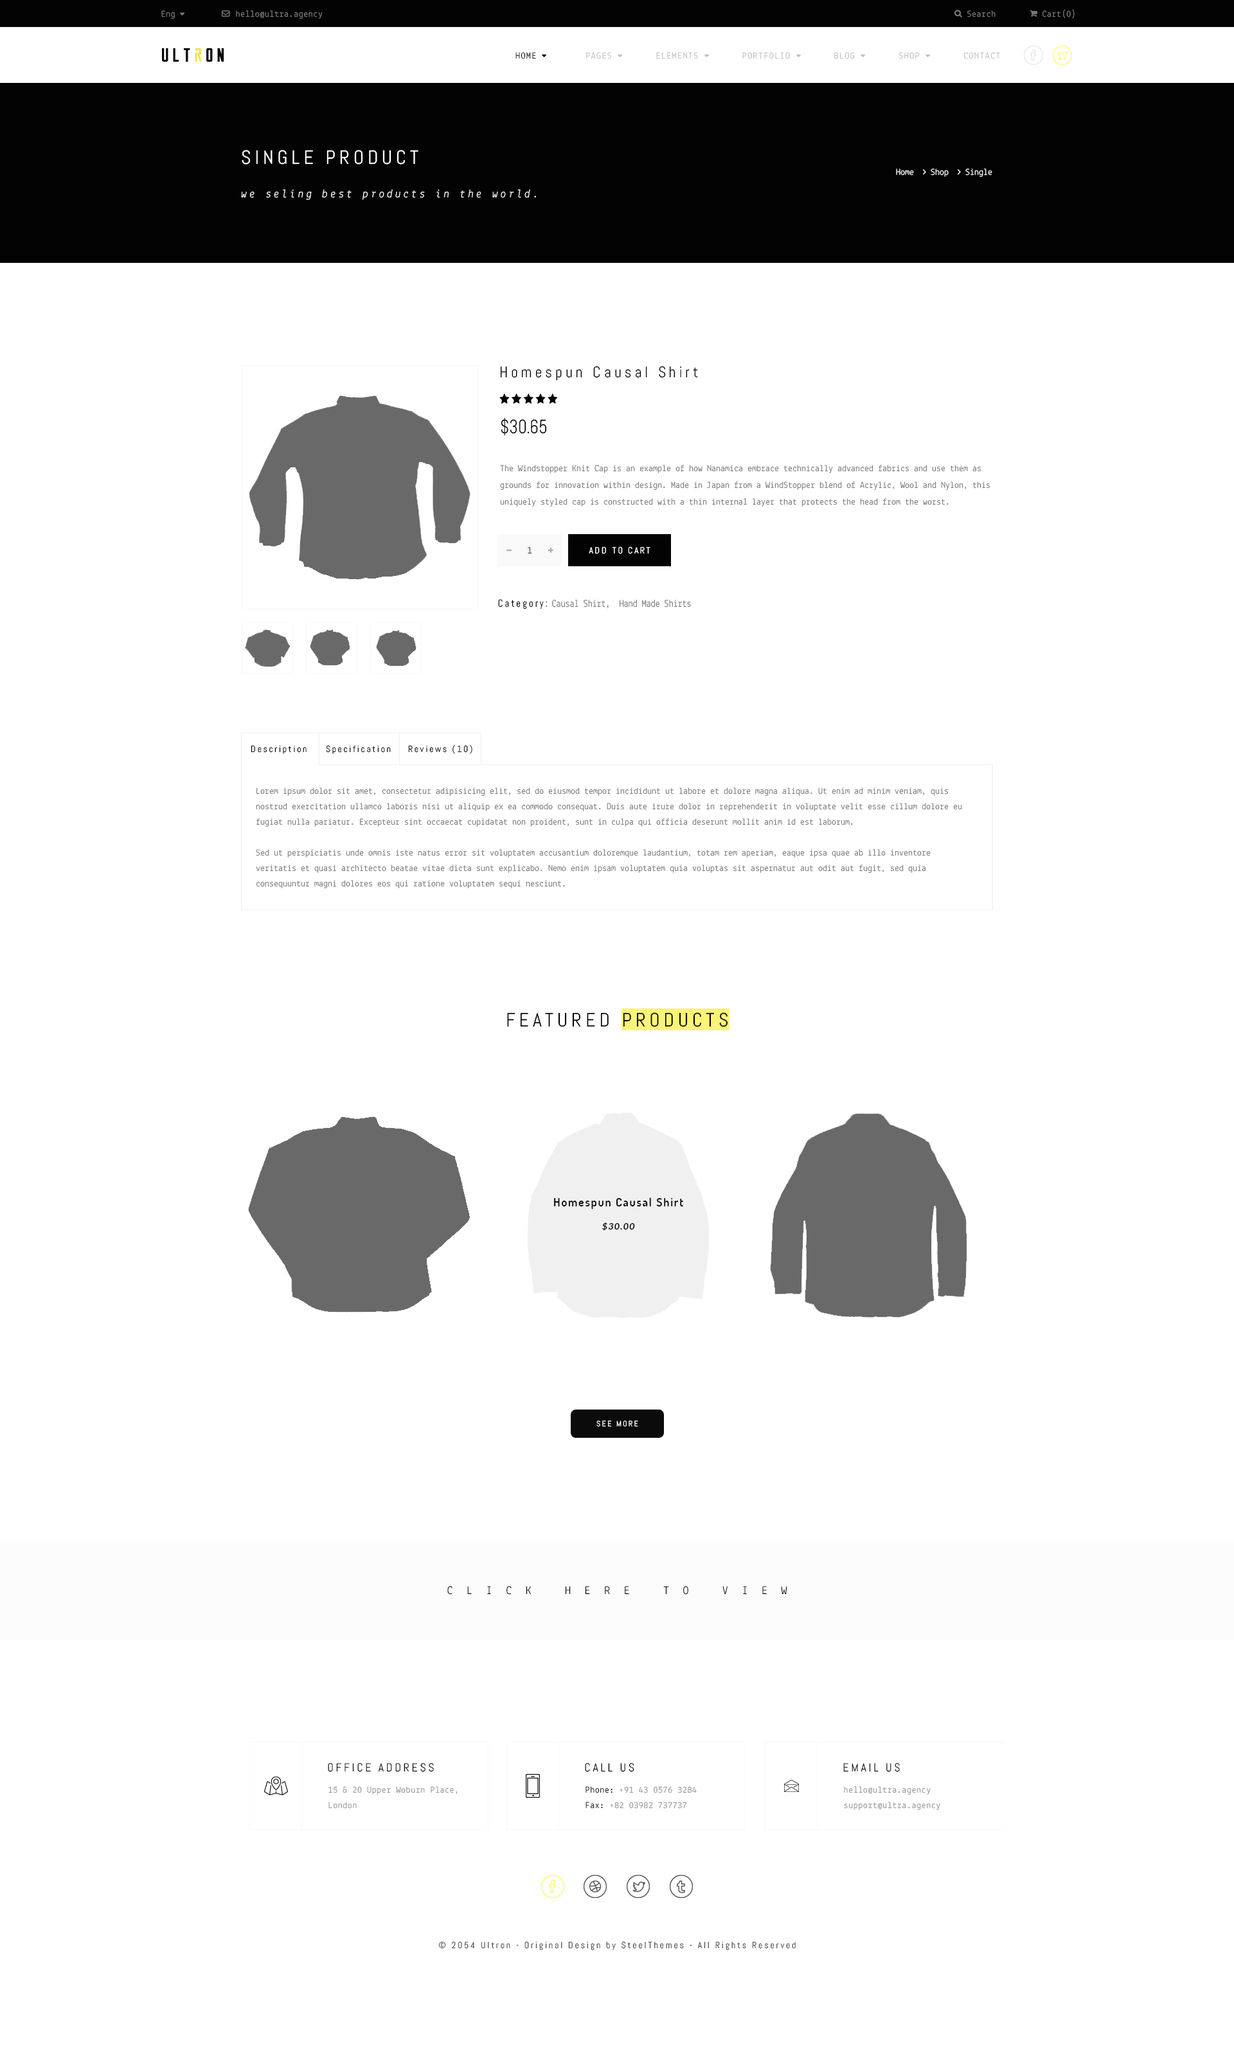
<style>
.page{position:relative;width:1234px;height:2051px;background:#ffffff}
.page>*{position:absolute;margin:0}
.t1{font:9px "Lekton-Regular";letter-spacing:0.04em;color:#787878}
.t2{font:9px "Lekton-Regular";letter-spacing:0.1em;color:#bfbfbf;text-transform:uppercase}
.t3{font:9px "Lekton-Regular";letter-spacing:0.1em;color:#030303;text-transform:uppercase}
.t4{font:19.3px "Abel-Regular";letter-spacing:0.2em;color:#ffffff;text-transform:uppercase}
.t5{font:11.6px "Lekton-Italic";letter-spacing:0.2em;color:#ffffff}
.t6{font:15.4px "Abel-Regular";letter-spacing:0.2em;color:#030303}
.t7{font:19.3px "Abel-Regular";color:#030303;scale:0.9 1}
.t8{font:9px/16.7px "Lekton-Regular";color:#787878}
.t9{font:9px "Abel-Regular";letter-spacing:0.1em;color:#333333}
.t10{font:9px "Abel-Regular";letter-spacing:0.2em;color:#ffffff}
.t11{font:10.3px "Lekton-Regular";color:#787878;scale:0.9 1}
.t12{font:10.3px "Abel-Regular";letter-spacing:0.2em;color:#030303;scale:0.9 1}
.t13{font:9px "Abel-Regular";letter-spacing:0.2em;color:#030303}
.t14{font:9px/15.4px "Lekton-Regular";color:#787878}
.t15{font:19.3px "Abel-Regular";letter-spacing:0.2em;color:#030303;text-transform:uppercase}
.t16{font:11.6px/23.1px "Dosis-SemiBold";letter-spacing:0.1em;color:#0b0b0b}
.t17{font:9px/23.1px "Lato-BoldItalic";letter-spacing:0.1em;color:#0b0b0b}
.t18{font:7.7px "Abel-Regular";letter-spacing:0.2em;color:#ffffff;text-transform:uppercase}
.t19{font:11.6px "Lekton-Regular";letter-spacing:1.2em;color:#030303;text-transform:uppercase}
.t20{font:11.6px "Abel-Regular";letter-spacing:0.2em;color:#030303;text-transform:uppercase}
.t21{font:9px/15.4px "Lekton-Regular";letter-spacing:0.04em;color:#969595}
.t22{font:9px/15.4px "Lekton-Regular";letter-spacing:0.04em;color:#030303}
.t23{font:9px "Abel-Regular";letter-spacing:0.2em;color:#4f4f4f}
</style>
<div class="page">
<p class="t1" style="left:161px;top:10px;width:14px;height:9px">Eng</p>
<p class="t1" style="left:236px;top:10px;width:87px;height:9px">hello@ultra.agency</p>
<p class="t1" style="left:968px;top:10px;width:28px;height:7px">Search</p>
<p class="t1" style="left:1043px;top:9px;width:32px;height:10px">Cart(0)</p>
<p class="t2" style="left:516px;top:52px;width:484px;height:7px"><span class="t3">Home         </span>Pages        Elements        Portfolio        Blog        Shop        Contact</p>
<p class="t4" style="left:242px;top:150px;width:177px;height:15px">single product</p>
<p class="t5" style="left:241px;top:189px;width:295px;height:11px">we seling best products in the world.</p>
<p class="t6" style="left:500px;top:366px;width:198px;height:15px">Homespun Causal Shirt</p>
<p class="t7" style="left:501px;top:418px;width:46px;height:18px">$30.65</p>
<p class="t8" style="left:500px;top:465px;width:490px;height:42px">The Windstopper Knit Cap is an example of how Nanamica embrace technically advanced fabrics and use them as grounds for innovation within design. Made in Japan from a WindStopper blend of Acrylic, Wool and Nylon, this uniquely styled cap is constructed with a thin internal layer that protects the head from the worst.</p>
<p class="t9" style="left:528px;top:547px;width:4px;height:7px">1</p>
<p class="t10" style="left:589px;top:546px;width:62px;height:8px">ADD TO CART</p>
<p class="t11" style="left:498px;top:599px;width:193px;height:10px"><span class="t12">Category: </span>Causal Shirt,  Hand Made Shirts</p>
<p class="t13" style="left:251px;top:746px;width:56px;height:8px">Description</p>
<p class="t13" style="left:326px;top:745px;width:65px;height:9px">Specification</p>
<p class="t13" style="left:408px;top:745px;width:65px;height:9px">Reviews (10)</p>
<p class="t14" style="left:256px;top:788px;width:706px;height:100px">Lorem ipsum dolor sit amet, consectetur adipisicing elit, sed do eiusmod tempor incididunt ut labore et dolore magna aliqua. Ut enim ad minim veniam, quis nostrud exercitation ullamco laboris nisi ut aliquip ex ea commodo consequat. Duis aute irure dolor in reprehenderit in voluptate velit esse cillum dolore eu fugiat nulla pariatur. Excepteur sint occaecat cupidatat non proident, sunt in culpa qui officia deserunt mollit anim id est laborum.<br><br>Sed ut perspiciatis unde omnis iste natus error sit voluptatem accusantium doloremque laudantium, totam rem aperiam, eaque ipsa quae ab illo inventore veritatis et quasi architecto beatae vitae dicta sunt explicabo. Nemo enim ipsam voluptatem quia voluptas sit aspernatur aut odit aut fugit, sed quia consequuntur magni dolores eos qui ratione voluptatem sequi nesciunt.</p>
<p class="t15" style="left:507px;top:1013px;width:221px;height:14px">Featured products</p>
<p class="t16" style="left:554px;top:1198px;width:129px;height:33px;text-align:center">Homespun Causal Shirt<br><span class="t17">$30.00</span></p>
<p class="t18" style="left:597px;top:1421px;width:41px;height:6px">See More</p>
<p class="t19" style="left:447px;top:1586px;width:341px;height:9px">Click here to view</p>
<p class="t20" style="left:328px;top:1763px;width:106px;height:9px">Office Address</p>
<p class="t20" style="left:585px;top:1763px;width:49px;height:9px">Call us</p>
<p class="t20" style="left:843px;top:1763px;width:57px;height:9px">Email us</p>
<p class="t21" style="left:328px;top:1787px;width:130px;height:22px">15 &amp; 20 Upper Woburn Place,<br>London</p>
<p class="t21" style="left:586px;top:1787px;width:111px;height:22px"><span class="t22">Phone:</span> +91 43 0576 3284<br><span class="t22">Fax:</span> +82 03982 737737</p>
<p class="t21" style="left:844px;top:1787px;width:97px;height:23px">hello@ultra.agency<br>support@ultra.agency</p>
<p class="t23" style="left:438px;top:1941px;width:358px;height:9px">© 2054 Ultron - Original Design by SteelThemes - All Rights Reserved</p>
</div>
